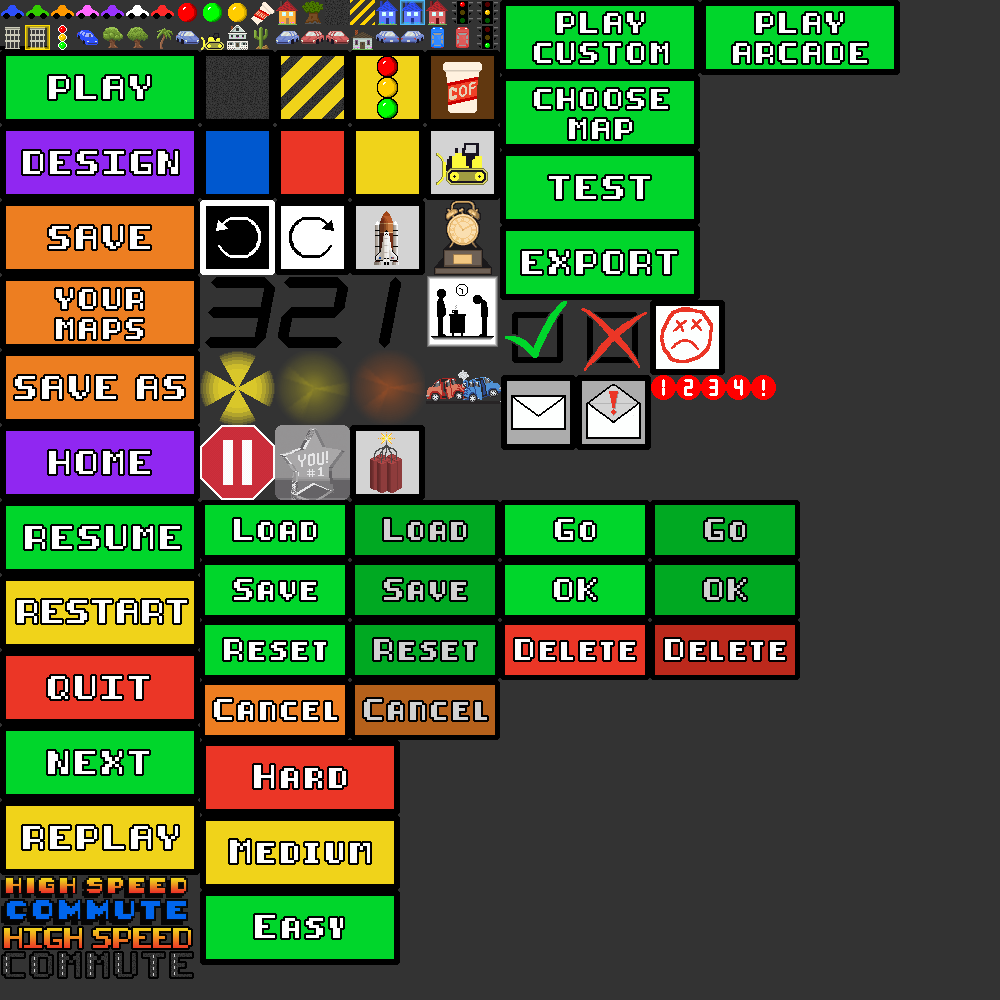
<style>
.page{position:relative;width:1000px;height:1000px;background:#333333}
.page>*{position:absolute;margin:0}
.t1{font:17px/30px "8-bit-pusab";letter-spacing:0.2em;color:#ffffff}
.t2{font:20px "8-bit-pusab";letter-spacing:0.2em;color:#ffffff}
.t3{font:18px "8-bit-pusab";letter-spacing:0.2em;color:#ffffff}
.t4{font:18px "8-bit-pusab";letter-spacing:0.2em;color:#d1d1d1}
.t5{font:20px "8-bit-pusab";letter-spacing:0.1em;color:#ffffff}
.t6{font:20px "8-bit-pusab";letter-spacing:0.2em;color:#fefefe}
</style>
<div class="page">
<p class="t1" style="left:534px;top:13px;width:134px;height:50px;text-align:center">PLAY<br>CUSTOM</p>
<p class="t1" style="left:733px;top:13px;width:134px;height:50px;text-align:center">PLAY<br>ARCADE</p>
<p class="t2" style="left:49px;top:76px;width:101px;height:23px">PLAY</p>
<p class="t1" style="left:534px;top:89px;width:134px;height:50px;text-align:center">CHOOSE<br>MAP</p>
<p class="t2" style="left:23px;top:151px;width:155px;height:23px">DESIGN</p>
<p class="t2" style="left:549px;top:176px;width:101px;height:23px">TEST</p>
<p class="t2" style="left:49px;top:226px;width:101px;height:23px">SAVE</p>
<p class="t2" style="left:522px;top:251px;width:155px;height:23px">EXPORT</p>
<p class="t1" style="left:56px;top:289px;width:87px;height:50px;text-align:center">YOUR<br>MAPS</p>
<p class="t2" style="left:15px;top:376px;width:169px;height:23px">SAVE AS</p>
<p class="t2" style="left:49px;top:451px;width:101px;height:23px">HOME</p>
<p class="t3" style="left:234px;top:519px;width:82px;height:21px">Load</p>
<p class="t4" style="left:384px;top:519px;width:82px;height:21px">Load</p>
<p class="t3" style="left:555px;top:519px;width:40px;height:21px">Go</p>
<p class="t4" style="left:705px;top:519px;width:40px;height:21px">Go</p>
<p class="t2" style="left:25px;top:526px;width:155px;height:23px">RESUME</p>
<p class="t3" style="left:234px;top:579px;width:82px;height:21px">Save</p>
<p class="t4" style="left:384px;top:579px;width:82px;height:21px">Save</p>
<p class="t3" style="left:554px;top:579px;width:42px;height:21px">OK</p>
<p class="t4" style="left:704px;top:579px;width:42px;height:21px">OK</p>
<p class="t5" style="left:17px;top:600px;width:170px;height:23px">RESTART</p>
<p class="t3" style="left:224px;top:639px;width:102px;height:21px">Reset</p>
<p class="t4" style="left:374px;top:639px;width:102px;height:21px">Reset</p>
<p class="t3" style="left:515px;top:639px;width:120px;height:21px">Delete</p>
<p class="t3" style="left:665px;top:639px;width:120px;height:21px">Delete</p>
<p class="t2" style="left:48px;top:676px;width:101px;height:23px">QUIT</p>
<p class="t3" style="left:214px;top:699px;width:123px;height:21px">Cancel</p>
<p class="t4" style="left:364px;top:699px;width:123px;height:21px">Cancel</p>
<p class="t2" style="left:48px;top:751px;width:101px;height:23px">NEXT</p>
<p class="t2" style="left:254px;top:765px;width:92px;height:23px">Hard</p>
<p class="t6" style="left:23px;top:826px;width:155px;height:23px">REPLAY</p>
<p class="t2" style="left:230px;top:840px;width:140px;height:23px">Medium</p>
<p class="t2" style="left:255px;top:915px;width:88px;height:23px">Easy</p>
</div>
